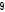
<style>
.page{position:relative;width:5px;height:12px;background:#ffffff}
.page>*{position:absolute;margin:0}
.t1{font:11.2px "ArialNarrow";color:#000000;scale:0.8 1}
</style>
<div class="page">
<p class="t1" style="left:0px;top:0px;width:4px;height:13px">9</p>
</div>
